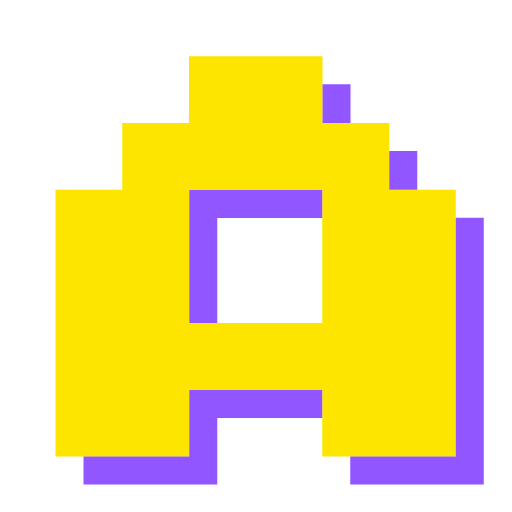
<style>
.page{position:relative;width:512px;height:512px;background:#ffffff}
.page>*{position:absolute;margin:0}
.t1{font:533.3px "AtariClassicChunky";color:#fde500}
</style>
<div class="page">
<p class="t1" style="left:55px;top:56px;width:401px;height:401px">A</p>
</div>
